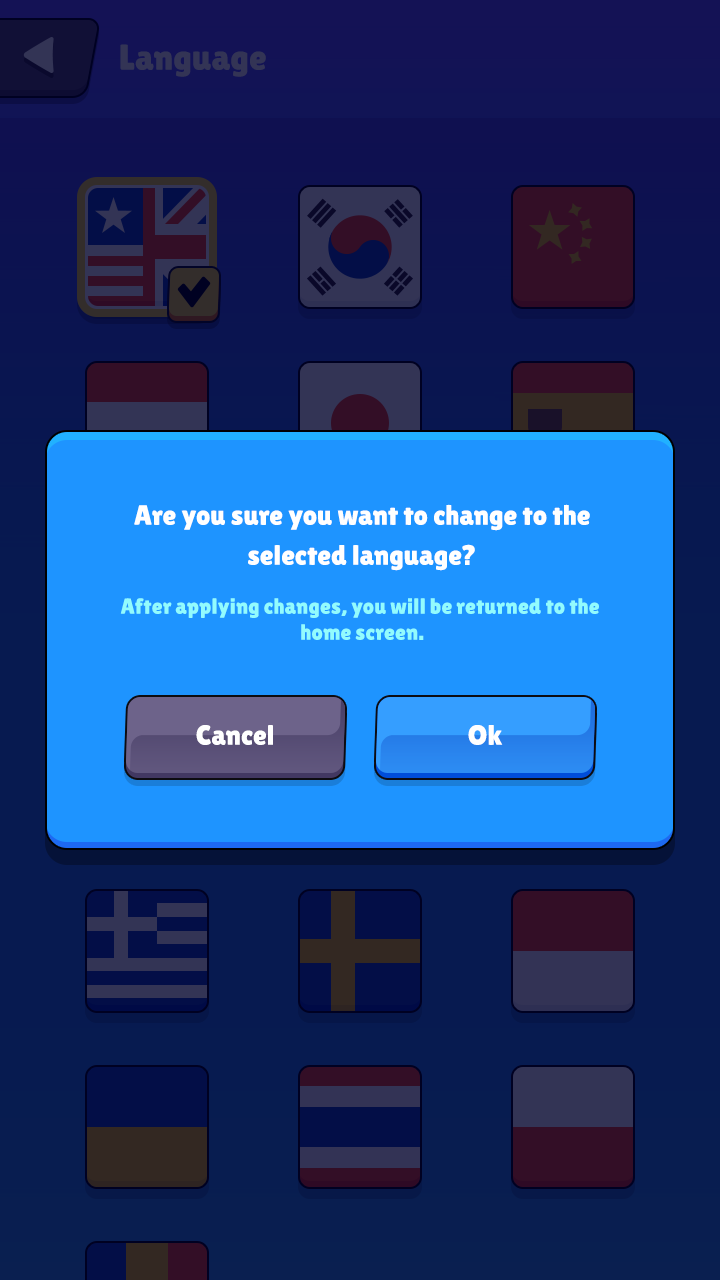
<style>
.page{position:relative;width:720px;height:1280px;background:#1e94ff}
.page>*{position:absolute;margin:0}
.t1{font:28px/40px "LilitaOne";color:#ffffff}
.t2{font:22px/26px "LilitaOne";color:#92fbfd}
.t3{font:28px "LilitaOne";color:#ffffff}
</style>
<div class="page">
<p class="t1" style="left:134px;top:504px;width:456px;height:67px;text-align:center">Are you sure you want to change to the<br>selected language?</p>
<p class="t2" style="left:120px;top:598px;width:479px;height:42px;text-align:center">After applying changes, you will be returned to the <br>home screen.</p>
<p class="t3" style="left:196px;top:725px;width:77px;height:20px">Cancel</p>
<p class="t3" style="left:468px;top:725px;width:35px;height:20px">Ok</p>
</div>
